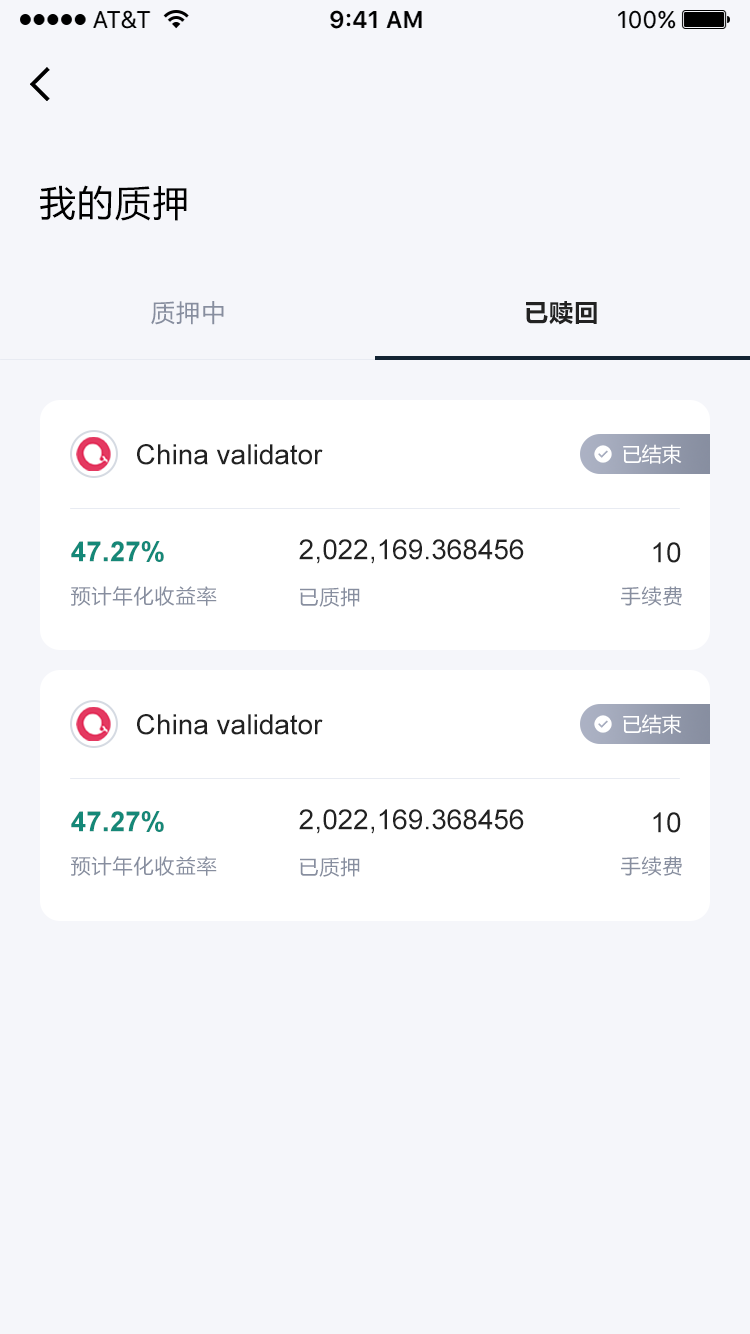
<style>
.page{position:relative;width:750px;height:1334px;background:#f5f6fa}
.page>*{position:absolute;margin:0}
.t1{font:36px "MicrosoftYaHei";letter-spacing:0.05em;color:#000000}
.t2{font:24px "MicrosoftYaHei";letter-spacing:0.05em;color:#878e9f}
.t3{font:24px "MicrosoftYaHei-Bold";letter-spacing:0.05em;color:#222222}
.t4{font:28px "ArialMT";color:#222222}
.t5{font:20px "MicrosoftYaHei";color:#ffffff}
.t6{font:28px "Arial-BoldMT";color:#158878}
.t7{font:20px "MicrosoftYaHei";letter-spacing:0.05em;color:#878e9f}
</style>
<div class="page">
<p class="t1" style="left:40px;top:185px;width:147px;height:36px">我的质押</p>
<p class="t2" style="left:151px;top:301px;width:73px;height:24px">质押中</p>
<p class="t3" style="left:526px;top:301px;width:71px;height:24px">已赎回</p>
<p class="t4" style="left:137px;top:444px;width:186px;height:21px">China validator</p>
<p class="t5" style="left:623px;top:444px;width:59px;height:20px">已结束</p>
<p class="t6" style="left:71px;top:541px;width:93px;height:21px">47.27%</p>
<p class="t4" style="left:299px;top:539px;width:225px;height:25px">2,022,169.368456</p>
<p class="t4" style="left:653px;top:542px;width:28px;height:21px">10</p>
<p class="t7" style="left:71px;top:586px;width:146px;height:20px">预计年化收益率</p>
<p class="t7" style="left:300px;top:587px;width:60px;height:20px">已质押</p>
<p class="t7" style="left:621px;top:586px;width:61px;height:20px">手续费</p>
<p class="t4" style="left:137px;top:714px;width:186px;height:21px">China validator</p>
<p class="t5" style="left:623px;top:714px;width:59px;height:20px">已结束</p>
<p class="t4" style="left:299px;top:809px;width:225px;height:25px">2,022,169.368456</p>
<p class="t6" style="left:71px;top:811px;width:93px;height:21px">47.27%</p>
<p class="t4" style="left:653px;top:812px;width:28px;height:21px">10</p>
<p class="t7" style="left:71px;top:856px;width:146px;height:20px">预计年化收益率</p>
<p class="t7" style="left:300px;top:857px;width:60px;height:20px">已质押</p>
<p class="t7" style="left:621px;top:856px;width:61px;height:20px">手续费</p>
</div>
